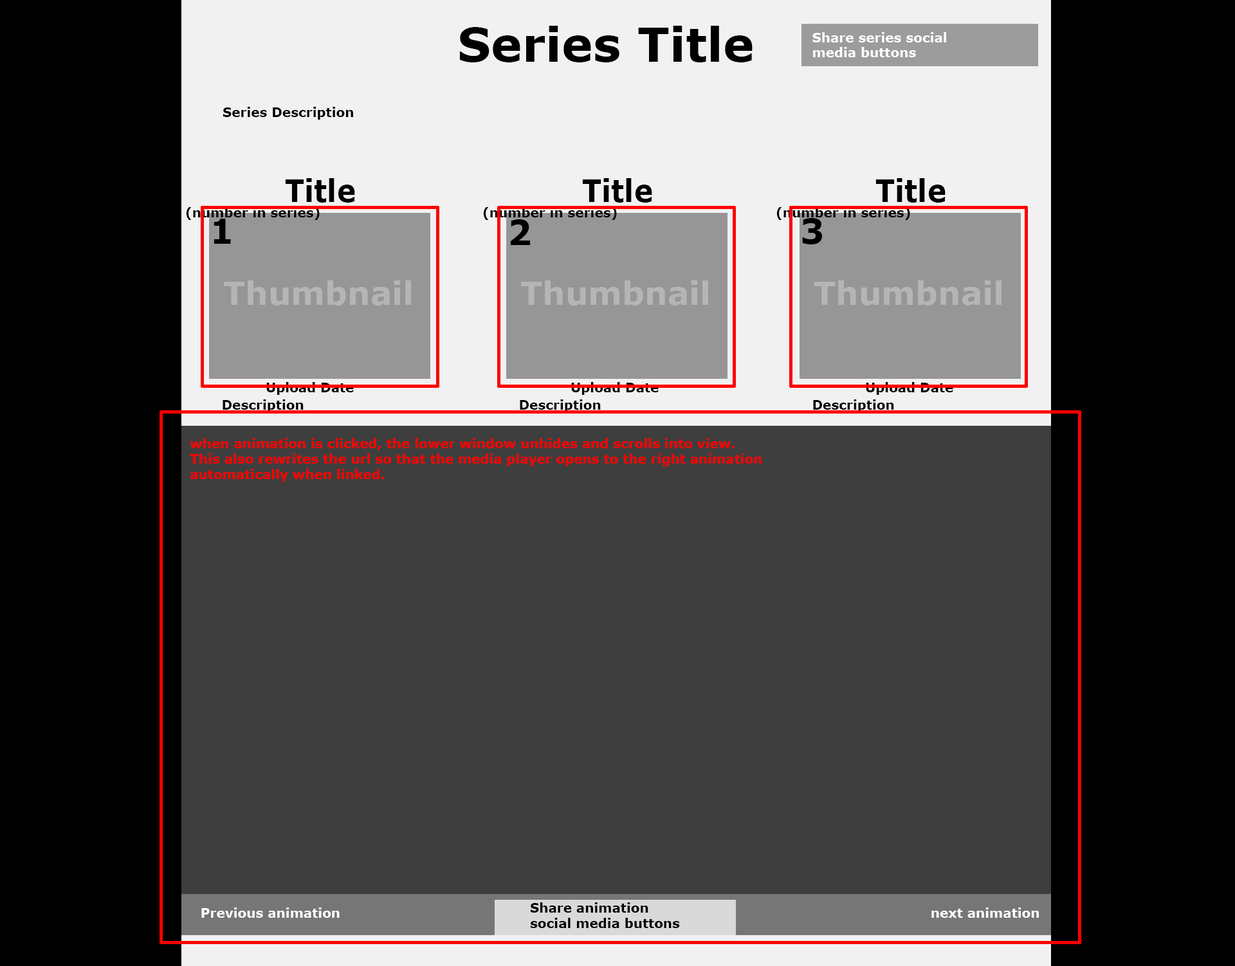
<style>
.page{position:relative;width:1235px;height:966px;background:#3e3e3e}
.page>*{position:absolute;margin:0}
.t1{font:47.2px "Verdana-Bold";color:#000000}
.t2{font:12.9px "Verdana-Bold";color:#ffffff}
.t3{font:12.9px "Verdana-Bold";color:#000000}
.t4{font:30.7px "Verdana-Bold";color:#000000;scale:0.93 1}
.t5{font:34.3px "Verdana-Bold";color:#000000}
.t6{font:32.1px "Verdana-Bold";color:#b5b5b5}
.t7{font:12.9px "Verdana-Bold";color:#ff0000}
</style>
<div class="page">
<p class="t1" style="left:459px;top:26px;width:293px;height:36px">Series Title</p>
<p class="t2" style="left:812px;top:32px;width:134px;height:25px">Share series social <br>media buttons</p>
<p class="t3" style="left:223px;top:107px;width:130px;height:13px">Series Description</p>
<p class="t4" style="left:285px;top:178px;width:70px;height:25px">Title</p>
<p class="t4" style="left:582px;top:178px;width:70px;height:25px">Title</p>
<p class="t4" style="left:875px;top:178px;width:70px;height:25px">Title</p>
<p class="t3" style="left:186px;top:207px;width:134px;height:13px">(number in series)</p>
<p class="t3" style="left:483px;top:207px;width:134px;height:13px">(number in series)</p>
<p class="t3" style="left:776px;top:207px;width:134px;height:13px">(number in series)</p>
<p class="t5" style="left:213px;top:219px;width:18px;height:25px">1</p>
<p class="t5" style="left:510px;top:219px;width:20px;height:26px">2</p>
<p class="t5" style="left:802px;top:218px;width:20px;height:26px">3</p>
<p class="t6" style="left:224px;top:280px;width:187px;height:25px">Thumbnail</p>
<p class="t6" style="left:521px;top:280px;width:187px;height:25px">Thumbnail</p>
<p class="t6" style="left:814px;top:280px;width:187px;height:25px">Thumbnail</p>
<p class="t3" style="left:266px;top:382px;width:88px;height:13px">Upload Date</p>
<p class="t3" style="left:571px;top:382px;width:87px;height:13px">Upload Date</p>
<p class="t3" style="left:866px;top:382px;width:87px;height:13px">Upload Date</p>
<p class="t3" style="left:222px;top:399px;width:82px;height:13px">Description</p>
<p class="t3" style="left:520px;top:399px;width:81px;height:13px">Description</p>
<p class="t3" style="left:813px;top:399px;width:81px;height:13px">Description</p>
<p class="t7" style="left:190px;top:438px;width:571px;height:44px">when animation is clicked, the lower window unhides and scrolls into view.<br>This also rewrites the url so that the media player opens to the right animation<br>automatically when linked.</p>
<p class="t3" style="left:530px;top:902px;width:150px;height:26px">Share animation <br>social media buttons</p>
<p class="t2" style="left:201px;top:907px;width:139px;height:11px">Previous animation</p>
<p class="t2" style="left:931px;top:907px;width:107px;height:11px">next animation</p>
</div>
